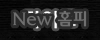
<style>
.page{position:relative;width:100px;height:40px}
.page>*{position:absolute;margin:0}
.t1{font:18px "2002L";color:#6f6f6f}
.t2{font:21px "2002L"}
</style>
<div class="page">
<p class="t1" style="left:13px;top:10px;width:74px;height:17px">New 홈피</p>
<p class="t2" style="left:23px;top:10px;width:53px;height:19px">가이드</p>
</div>
